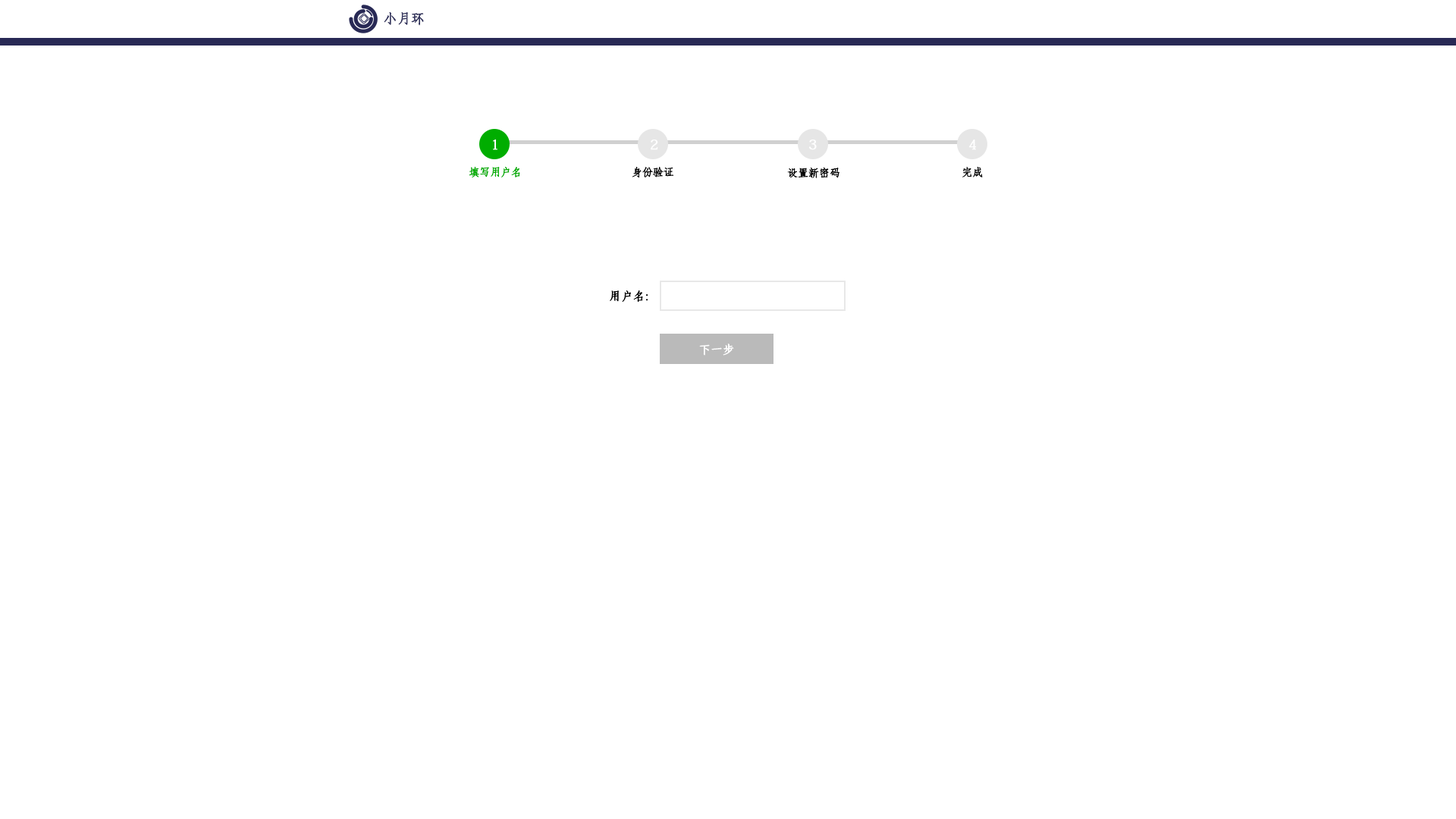
<style>
.page{position:relative;width:1456px;height:819px;background:#ffffff}
.page>*{position:absolute;margin:0}
.t1{font:13.4px "AdobeFangsongStd-Regular";color:#35365f;font-weight:bold}
.t2{font:13.6px "AdobeFangsongStd-Regular";color:#ffffff;font-weight:bold}
.t3{font:10.6px "AdobeFangsongStd-Regular";color:#00ad00;font-weight:bold}
.t4{font:10.6px "AdobeFangsongStd-Regular";color:#010101;font-weight:bold}
.t5{font:10.6px "AdobeFangsongStd-Regular";color:#000000;font-weight:bold}
.t6{font:11.4px "AdobeFangsongStd-Regular";color:#000000;font-weight:bold}
.t7{font:11.4px "AdobeFangsongStd-Regular";color:#ffffff;font-weight:bold}
</style>
<div class="page">
<p class="t1" style="left:384px;top:12px;width:40px;height:14px">小月环</p>
<p class="t2" style="left:493px;top:139px;width:4px;height:11px">1</p>
<p class="t2" style="left:651px;top:140px;width:7px;height:10px">2</p>
<p class="t2" style="left:809px;top:140px;width:8px;height:10px">3</p>
<p class="t2" style="left:969px;top:140px;width:8px;height:10px">4</p>
<p class="t3" style="left:469px;top:167px;width:51px;height:11px">填写用户名</p>
<p class="t4" style="left:632px;top:167px;width:42px;height:11px">身份验证</p>
<p class="t4" style="left:787px;top:167px;width:52px;height:11px">设置新密码</p>
<p class="t5" style="left:962px;top:167px;width:21px;height:10px">完成</p>
<p class="t6" style="left:610px;top:290px;width:38px;height:12px">用户名:</p>
<p class="t7" style="left:699px;top:344px;width:35px;height:12px">下一步</p>
</div>
